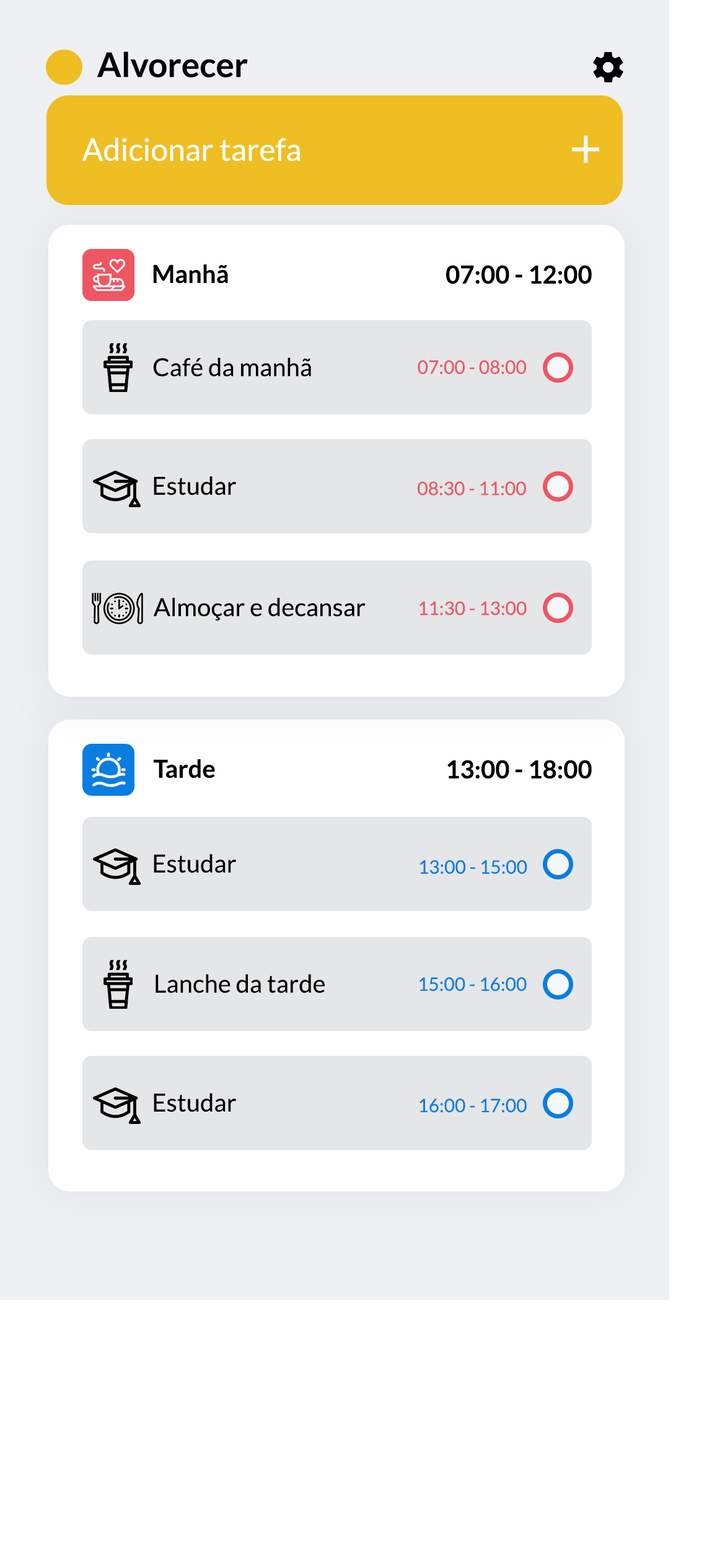
<style>
.page{position:relative;width:725px;height:1568px;background:#ffffff}
.page>*{position:absolute;margin:0}
.t1{font:34.1px "Lato-Bold";color:#030303}
.t2{font:31px "Lato-Regular";color:#ffffff}
.t3{font:24.8px "Lato-Bold";color:#000000}
.t4{font:24.8px "Lato-Regular";color:#000000}
.t5{font:18.6px "Lato-Regular";color:#ee5662}
.t6{font:18.6px "Lato-Regular";color:#0a7de1}
</style>
<div class="page">
<p class="t1" style="left:97px;top:51px;width:151px;height:26px">Alvorecer</p>
<p class="t2" style="left:82px;top:137px;width:218px;height:24px">Adicionar tarefa</p>
<p class="t3" style="left:153px;top:264px;width:75px;height:20px">Manhã</p>
<p class="t3" style="left:446px;top:265px;width:145px;height:19px">07:00 - 12:00</p>
<p class="t4" style="left:153px;top:357px;width:158px;height:20px">Café da manhã</p>
<p class="t5" style="left:417px;top:360px;width:109px;height:14px">07:00 - 08:00</p>
<p class="t4" style="left:154px;top:476px;width:82px;height:19px">Estudar</p>
<p class="t5" style="left:417px;top:481px;width:109px;height:14px">08:30 - 11:00</p>
<p class="t4" style="left:154px;top:598px;width:211px;height:23px">Almoçar e decansar</p>
<p class="t5" style="left:419px;top:601px;width:107px;height:15px">11:30 - 13:00</p>
<p class="t3" style="left:153px;top:759px;width:62px;height:19px">Tarde</p>
<p class="t3" style="left:447px;top:760px;width:144px;height:19px">13:00 - 18:00</p>
<p class="t4" style="left:154px;top:854px;width:82px;height:19px">Estudar</p>
<p class="t6" style="left:419px;top:860px;width:108px;height:14px">13:00 - 15:00</p>
<p class="t4" style="left:155px;top:974px;width:169px;height:19px">Lanche da tarde</p>
<p class="t6" style="left:419px;top:977px;width:107px;height:14px">15:00 - 16:00</p>
<p class="t4" style="left:154px;top:1093px;width:82px;height:19px">Estudar</p>
<p class="t6" style="left:419px;top:1099px;width:107px;height:14px">16:00 - 17:00</p>
</div>
